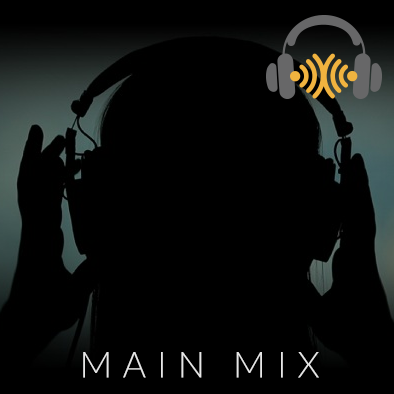
<style>
.page{position:relative;width:394px;height:394px;background:#000000}
.page>*{position:absolute;margin:0}
.t1{font:36px "Lato-Light";letter-spacing:0.05em;color:#e6e6e6}
</style>
<div class="page">
<p class="t1" style="left:83px;top:352px;width:236px;height:26px">M A I N   M I X</p>
</div>
